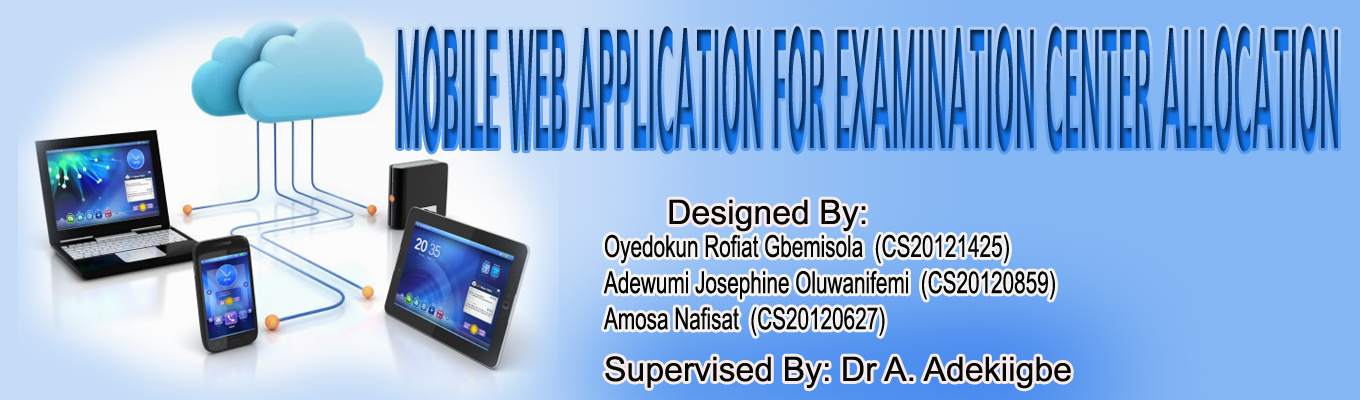
<style>
.page{position:relative;width:1360px;height:400px}
.page>*{position:absolute;margin:0}
.t1{font:150.7px "AdamsExtendedNormal";scale:0.09 1}
.t2{font:33.8px "ArialMT";color:#060707}
.t3{font:30.1px "ArialMT";color:#040404;scale:0.69 1}
</style>
<div class="page">
<p class="t1" style="left:398px;top:26px;width:940px;height:126px">MOBILE WEB APPLICATION FOR EXAMINATION CENTER ALLOCATION</p>
<p class="t2" style="left:669px;top:199px;width:197px;height:33px">Designed By:</p>
<p class="t3" style="left:604px;top:234px;width:451px;height:102px">Oyedokun Rofiat Gbemisola  (CS20121425)<br>Adewumi Josephine Oluwanifemi  (CS20120859)<br>Amosa Nafisat  (CS20120627)</p>
<p class="t2" style="left:605px;top:356px;width:466px;height:33px">Supervised By: Dr A. Adekiigbe</p>
</div>
